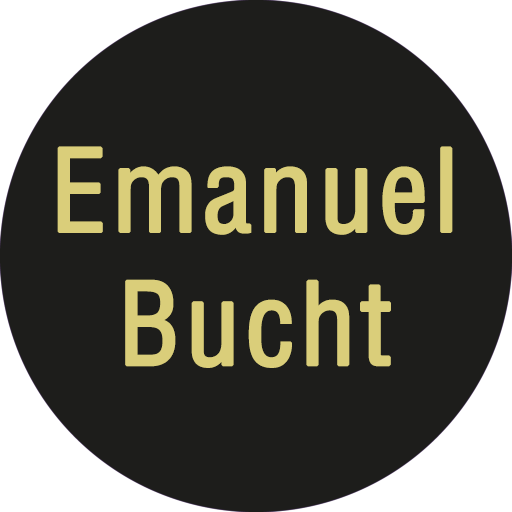
<style>
.page{position:relative;width:512px;height:512px;background:#1d1d1b}
.page>*{position:absolute;margin:0}
.t1{font:111px "HelveticaLTStd-Cond";letter-spacing:0.02em;color:#dace7a;font-weight:bold}
</style>
<div class="page">
<p class="t1" style="left:57px;top:146px;width:396px;height:222px;text-align:center">Emanuel<br>Bucht</p>
</div>
